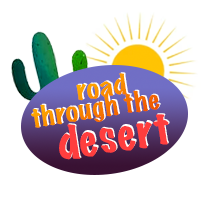
<style>
.page{position:relative;width:210px;height:210px;background:#ffffff}
.page>*{position:absolute;margin:0}
.t1{font:25.2px/20px "MarkerFelt-Wide"}
.t2{font:25.2px/18px "MarkerFelt-Wide"}
.t3{font:41.1px "MarkerFelt-Wide";color:#ff3e3e}
</style>
<div class="page">
<p class="t1" style="left:31px;top:73px;width:129px;height:55px;text-align:center;rotate:-9deg"><span class="t2">road<br></span>through the</p>
<p class="t1" style="left:32px;top:72px;width:129px;height:55px;text-align:center;rotate:-9deg"><span class="t2">road<br></span>through the</p>
<p class="t3" style="left:60px;top:113px;width:110px;height:46px;rotate:-9deg">desert</p>
<p class="t3" style="left:59px;top:114px;width:110px;height:46px;rotate:-9deg">desert</p>
</div>
